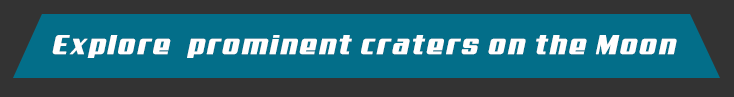
<style>
.page{position:relative;width:734px;height:97px;background:#036e89}
.page>*{position:absolute;margin:0}
.t1{font:27.1px "Aero";letter-spacing:0.06em;color:#fffefe;font-weight:bold}
</style>
<div class="page">
<p class="t1" style="left:52px;top:35px;width:625px;height:23px">Explore  prominent craters on the Moon</p>
</div>
